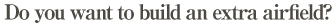
<style>
.page{position:relative;width:336px;height:27px;background:#ffffff}
.page>*{position:absolute;margin:0}
.t1{font:21px "RyuminPro-ExBold";letter-spacing:-0.08em;color:#4c4842}
</style>
<div class="page">
<p class="t1" style="left:4px;top:4px;width:328px;height:19px">Do you want to build an extra airfield?</p>
</div>
